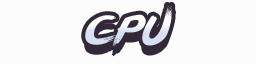
<style>
.page{position:relative;width:256px;height:64px;background:#fdfcfd}
.page>*{position:absolute;margin:0}
.t1{font:58.3px "BRUSHSTRIKE"}
</style>
<div class="page">
<p class="t1" style="left:85px;top:5px;width:88px;height:42px">cpu</p>
</div>
